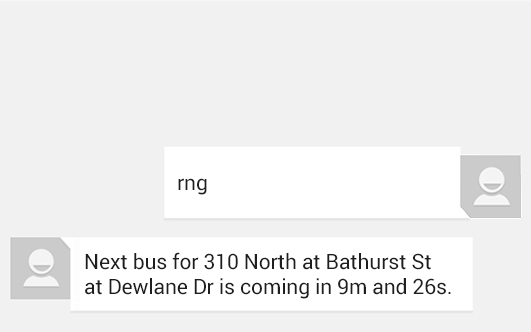
<style>
.page{position:relative;width:531px;height:332px;background:#f1f1f1}
.page>*{position:absolute;margin:0}
.t1{font:21px "Roboto-Regular";letter-spacing:-0.005em;color:#1e1e1e}
</style>
<div class="page">
<p class="t1" style="left:178px;top:178px;width:29px;height:17px">rng</p>
<p class="t1" style="left:85px;top:252px;width:366px;height:47px">Next bus for 310 North at Bathurst St at Dewlane Dr is coming in 9m and 26s.</p>
</div>
